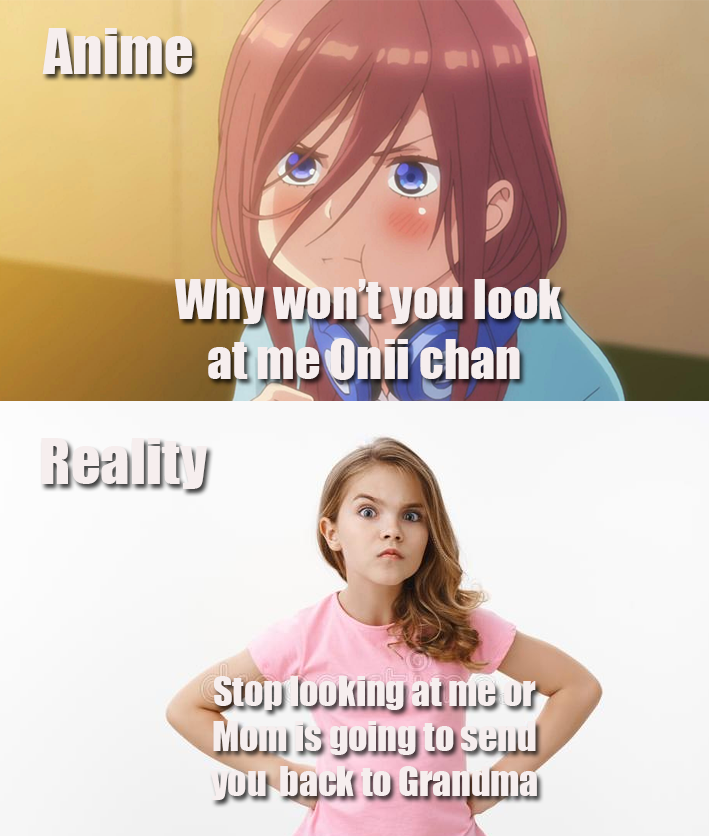
<style>
.page{position:relative;width:709px;height:836px}
.page>*{position:absolute;margin:0}
.t1{font:58.3px "Impact";color:#f6eeee}
.t2{font:50px "Impact";color:#f6eeee}
.t3{font:37.5px "Impact";color:#f6eeee}
</style>
<div class="page">
<p class="t1" style="left:42px;top:28px;width:150px;height:46px">Anime</p>
<p class="t2" style="left:174px;top:279px;width:388px;height:101px;text-align:center">Why won’t you look <br>at me Onii chan</p>
<p class="t1" style="left:41px;top:438px;width:166px;height:51px">Reality</p>
<p class="t3" style="left:210px;top:676px;width:327px;height:124px;text-align:center">Stop looking at me or <br>Mom is going to send <br>you  back to Grandma</p>
</div>
